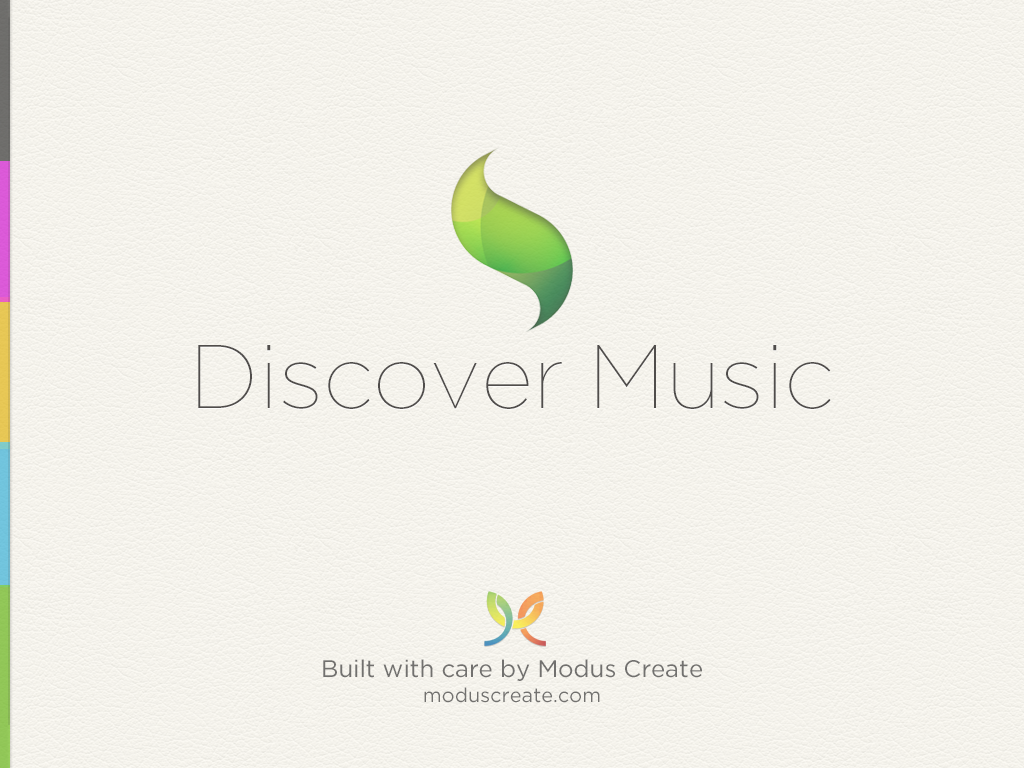
<style>
.page{position:relative;width:1024px;height:768px}
.page>*{position:absolute;margin:0}
.t1{font:90px "GothamHTF-Thin";color:#504d4b}
.t2{font:24px "GothamHTF-Book";color:#72716f}
.t3{font:20px "GothamHTF-Book";color:#72716f}
</style>
<div class="page">
<p class="t1" style="left:198px;top:345px;width:633px;height:64px">Discover Music</p>
<p class="t2" style="left:323px;top:659px;width:379px;height:22px">Built with care by Modus Create</p>
<p class="t3" style="left:424px;top:687px;width:176px;height:16px">moduscreate.com</p>
</div>
